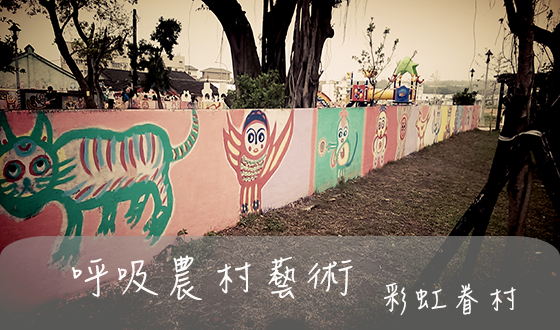
<style>
.page{position:relative;width:560px;height:330px}
.page>*{position:absolute;margin:0}
.t1{font:48px "DFHsiu-W3-WIN-BF";color:#fcfbfa}
.t2{font:36px "DFHsiu-W3-WIN-BF";color:#fcfbfa}
</style>
<div class="page">
<p class="t1" style="left:72px;top:255px;width:281px;height:45px">呼吸農村藝術</p>
<p class="t2" style="left:384px;top:283px;width:132px;height:33px">彩虹眷村</p>
</div>
